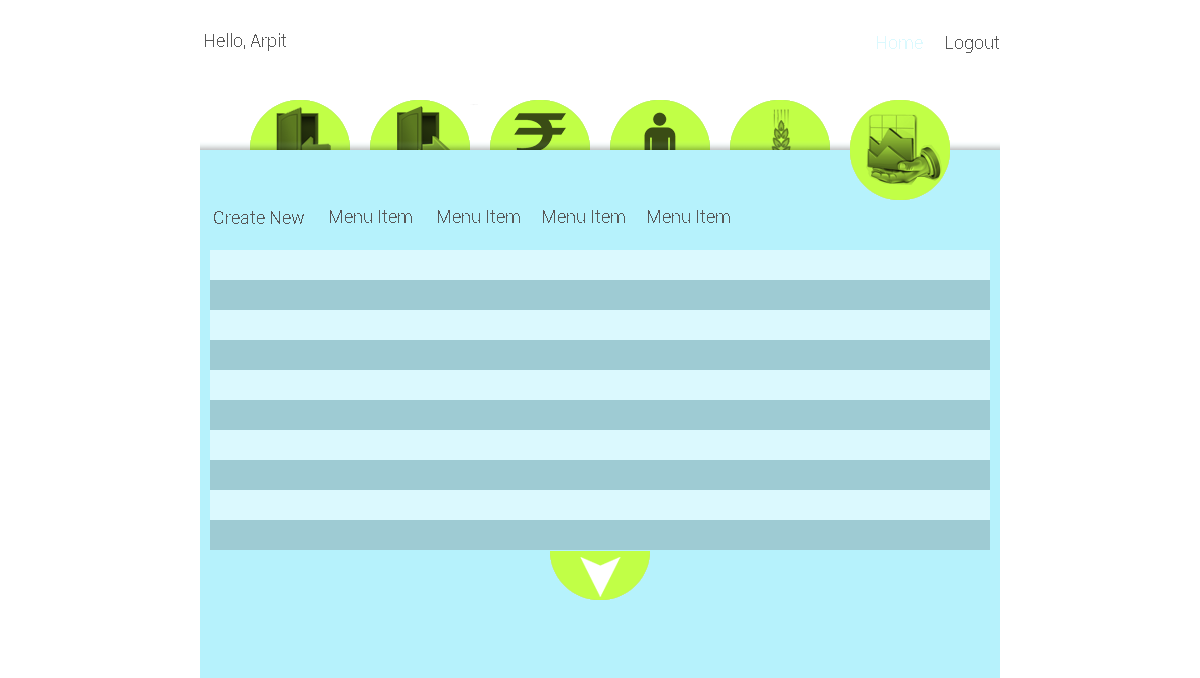
<style>
.page{position:relative;width:1200px;height:678px;background:#ffffff}
.page>*{position:absolute;margin:0}
.t1{font:18px "Roboto-Light";color:#575757}
.t2{font:18px "Roboto-Light";color:#dbf9fe}
</style>
<div class="page">
<p class="t1" style="left:205px;top:33px;width:81px;height:18px">Hello, Arpit</p>
<p class="t2" style="left:877px;top:36px;width:46px;height:13px">Home</p>
<p class="t1" style="left:946px;top:36px;width:53px;height:17px">Logout</p>
<p class="t1" style="left:214px;top:211px;width:90px;height:13px">Create New</p>
<p class="t1" style="left:330px;top:210px;width:82px;height:13px">Menu Item</p>
<p class="t1" style="left:438px;top:210px;width:82px;height:13px">Menu Item</p>
<p class="t1" style="left:543px;top:210px;width:82px;height:13px">Menu Item</p>
<p class="t1" style="left:648px;top:210px;width:82px;height:13px">Menu Item</p>
</div>
